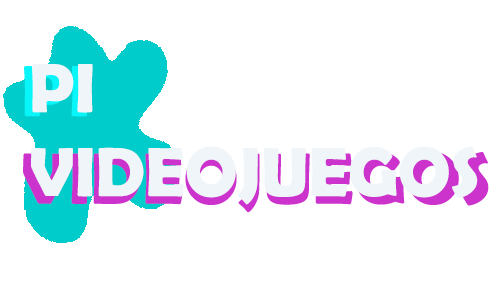
<style>
.page{position:relative;width:500px;height:300px;background:#ffffff}
.page>*{position:absolute;margin:0}
.t1{font:73px "BerlinSansFBDemi-Bold"}
</style>
<div class="page">
<p class="t1" style="left:23px;top:65px;width:466px;height:148px">PI<br>VIDEOJUEGOS</p>
</div>
